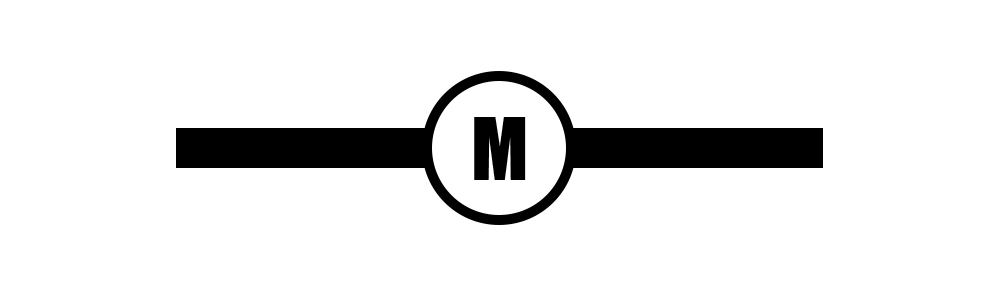
<style>
.page{position:relative;width:1000px;height:300px;background:#ffffff}
.page>*{position:absolute;margin:0}
.t1{font:80px "Impact";color:#000000}
</style>
<div class="page">
<p class="t1" style="left:474px;top:117px;width:52px;height:63px">M</p>
</div>
